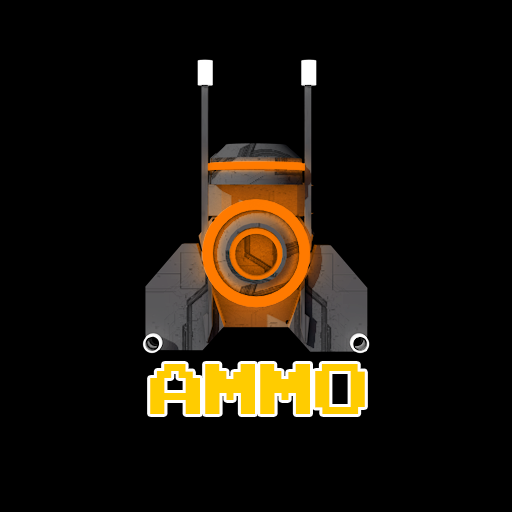
<style>
.page{position:relative;width:512px;height:512px;background:#000000}
.page>*{position:absolute;margin:0}
.t1{font:100px "ArcadeClassic";color:#ffcc00}
</style>
<div class="page">
<p class="t1" style="left:150px;top:364px;width:215px;height:50px">Ammo</p>
</div>
